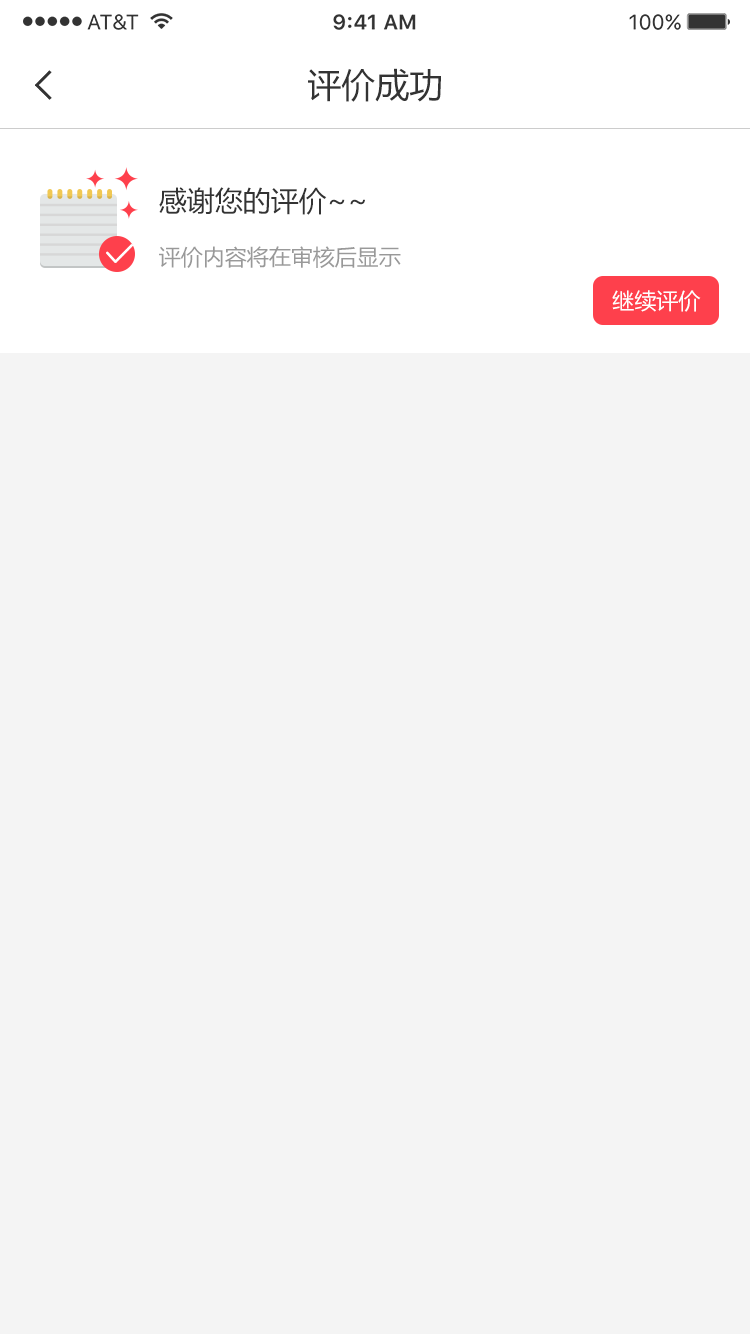
<style>
.page{position:relative;width:750px;height:1334px;background:#f4f4f4}
.page>*{position:absolute;margin:0}
.t1{font:34px "MicrosoftYaHei";color:#333333}
.t2{font:28px "MicrosoftYaHei";color:#333333}
.t3{font:22px "MicrosoftYaHei";color:#999999}
.t4{font:22px "MicrosoftYaHei";color:#ffffff}
</style>
<div class="page">
<p class="t1" style="left:308px;top:68px;width:133px;height:34px">评价成功</p>
<p class="t2" style="left:159px;top:187px;width:206px;height:28px">感谢您的评价~~</p>
<p class="t3" style="left:159px;top:246px;width:242px;height:22px">评价内容将在审核后显示</p>
<p class="t4" style="left:612px;top:290px;width:89px;height:22px">继续评价</p>
</div>
